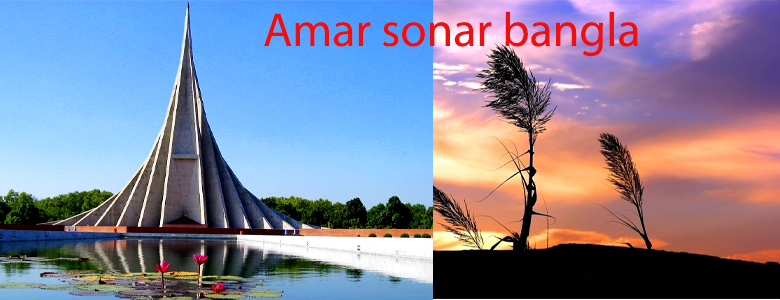
<style>
.page{position:relative;width:780px;height:300px}
.page>*{position:absolute;margin:0}
.t1{font:48px "MyriadPro-Regular";color:#ee0f0f}
</style>
<div class="page">
<p class="t1" style="left:264px;top:11px;width:374px;height:46px">Amar sonar bangla</p>
</div>
